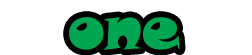
<style>
.page{position:relative;width:252px;height:55px;background:#ffffff}
.page>*{position:absolute;margin:0}
.t1{font:60px "SnapITC-Regular";color:#00a651}
</style>
<div class="page">
<p class="t1" style="left:69px;top:17px;width:111px;height:33px">one</p>
</div>
